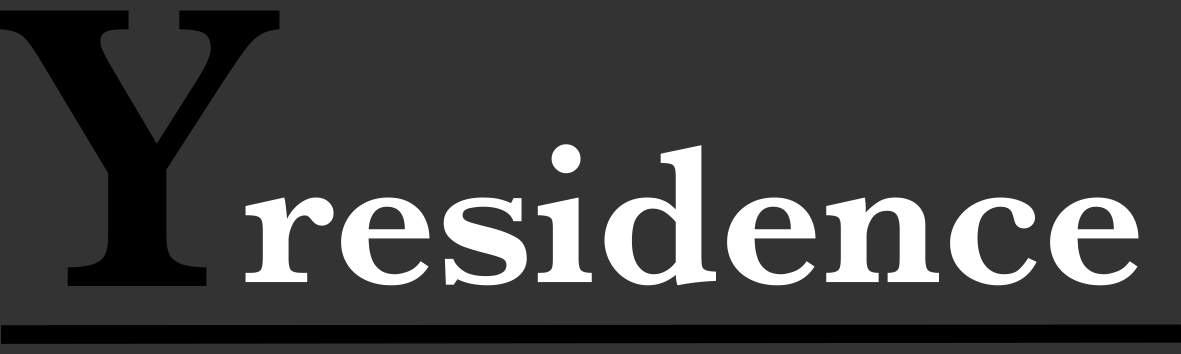
<style>
.page{position:relative;width:1181px;height:354px;background:#333333}
.page>*{position:absolute;margin:0}
.t1{font:416.4px "Baskerville-SemiBold";color:#000000}
.t2{font:202.6px "Baskerville-SemiBold";color:#ffffff}
</style>
<div class="page">
<p class="t1" style="left:0px;top:10px;width:280px;height:276px">Y</p>
<p class="t2" style="left:245px;top:144px;width:894px;height:142px">residence</p>
</div>
